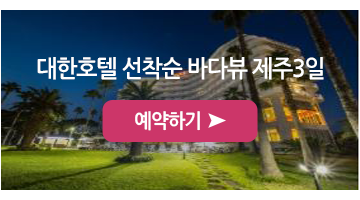
<style>
.page{position:relative;width:360px;height:200px}
.page>*{position:absolute;margin:0}
.t1{font:23.8px "NanumGothicBold";letter-spacing:-0.05em;color:#ffffff;scale:0.95 1}
.t2{font:19.8px "NanumGothicBold";letter-spacing:-0.05em;color:#ffffff;scale:0.95 1}
</style>
<div class="page">
<p class="t1" style="left:37px;top:57px;width:287px;height:23px">대한호텔 선착순 바다뷰 제주3일</p>
<p class="t2" style="left:135px;top:111px;width:65px;height:20px">예약하기</p>
</div>
